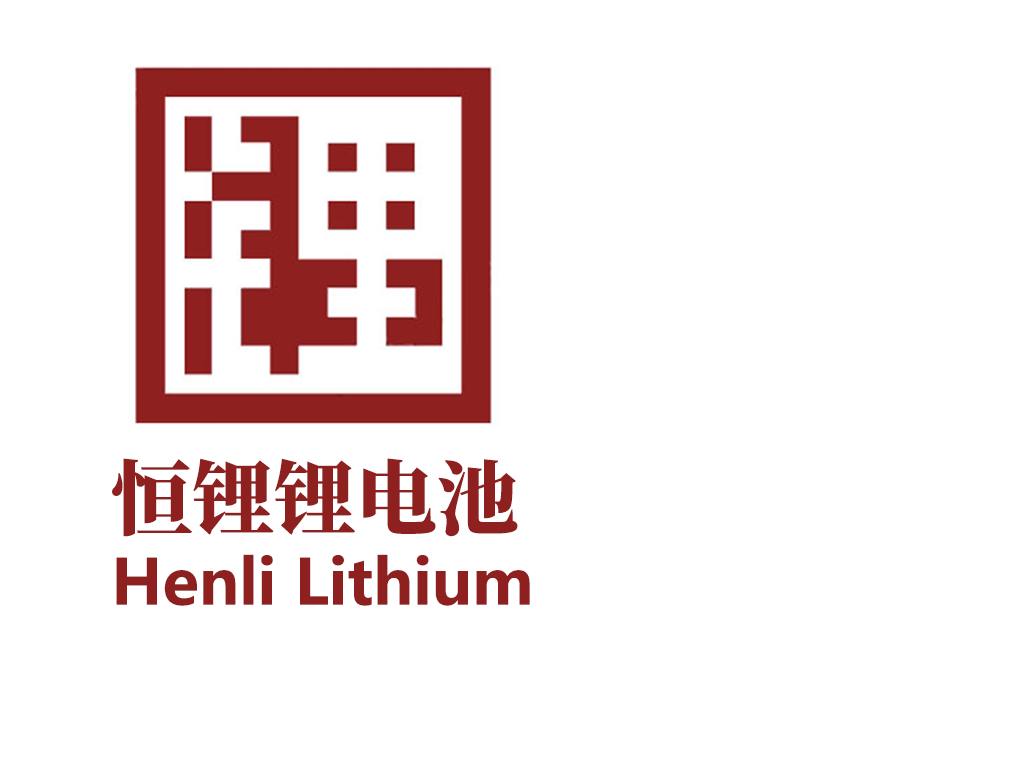
<style>
.page{position:relative;width:1024px;height:768px;background:#ffffff}
.page>*{position:absolute;margin:0}
.t1{font:81.6px "SourceHanSerifSC-Heavy";color:#8e201f}
.t2{font:62.4px "MicrosoftYaHei-Bold";color:#8e201f}
</style>
<div class="page">
<p class="t1" style="left:112px;top:458px;width:406px;height:79px">恒锂锂电池</p>
<p class="t2" style="left:116px;top:554px;width:414px;height:52px">Henli Lithium</p>
</div>
